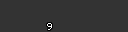
<style>
.page{position:relative;width:128px;height:32px;background:#333333}
.page>*{position:absolute;margin:0}
.t1{font:10px "Terminal";color:#ffffff}
</style>
<div class="page">
<p class="t1" style="left:47px;top:23px;width:5px;height:7px">9</p>
</div>
